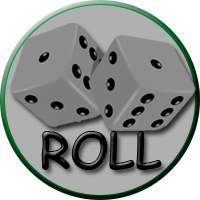
<style>
.page{position:relative;width:200px;height:200px;background:#ffffff}
.page>*{position:absolute;margin:0}
.t1{font:47.8px "ComicSansMS";color:#000000}
</style>
<div class="page">
<p class="t1" style="left:42px;top:132px;width:119px;height:37px">ROLL</p>
</div>
